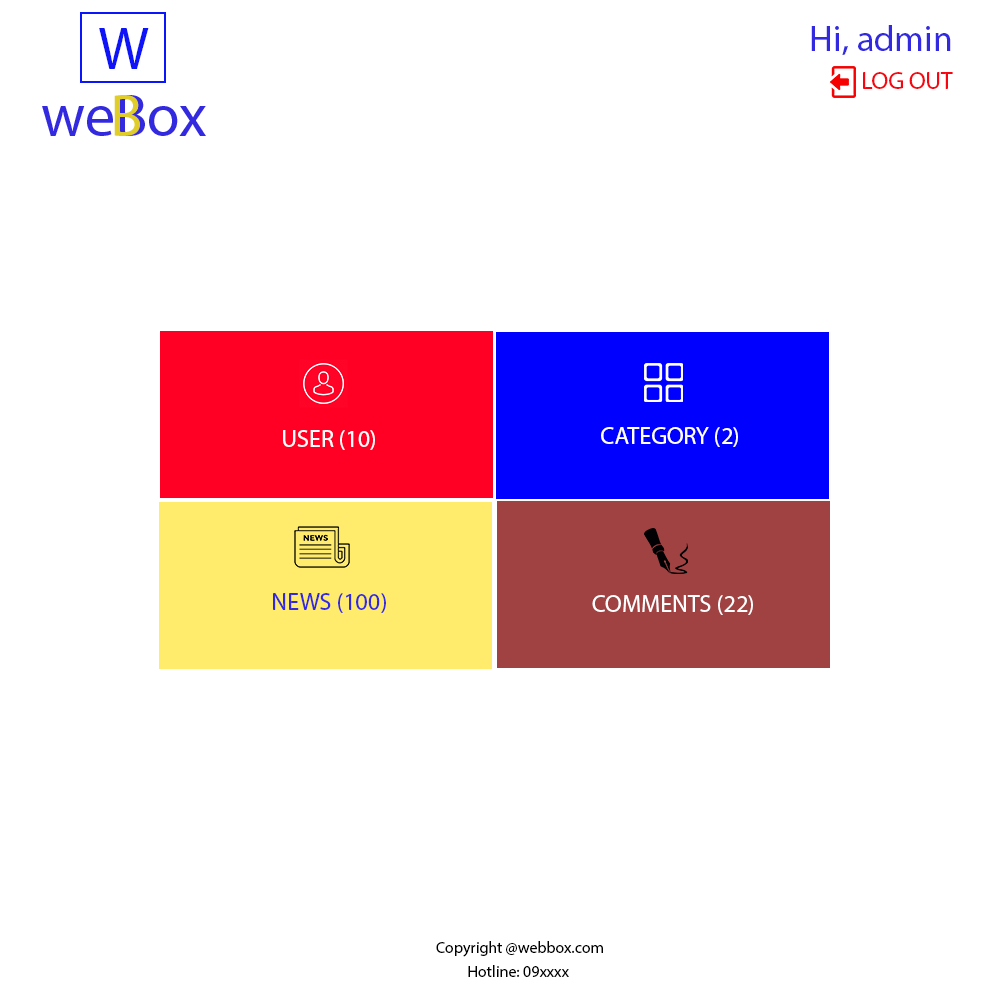
<style>
.page{position:relative;width:1000px;height:1000px;background:#ffffff}
.page>*{position:absolute;margin:0}
.t1{font:60px "MyriadPro-Regular";color:#190ef8}
.t2{font:36px "MyriadPro-Regular";color:#332ae0}
.t3{font:24px "MyriadPro-Regular";color:#f70510}
.t4{font:24px "MyriadPro-Regular";color:#ffffff}
.t5{font:24px "MyriadPro-Regular";color:#332ae0}
.t6{font:16px/24px "MyriadPro-Regular";color:#000000}
</style>
<div class="page">
<p class="t1" style="left:99px;top:28px;width:50px;height:41px">W</p>
<p class="t2" style="left:811px;top:25px;width:140px;height:30px">Hi, admin</p>
<p class="t3" style="left:863px;top:72px;width:90px;height:17px">LOG OUT</p>
<p class="t4" style="left:283px;top:430px;width:92px;height:20px">USER (10)</p>
<p class="t4" style="left:601px;top:427px;width:137px;height:20px">CATEGORY (2)</p>
<p class="t5" style="left:273px;top:593px;width:113px;height:20px">NEWS (100)</p>
<p class="t4" style="left:592px;top:595px;width:161px;height:20px">COMMENTS (22)</p>
<p class="t6" style="left:436px;top:941px;width:167px;height:36px;text-align:center">Copyright @webbox.com<br>Hotline: 09xxxx</p>
</div>
